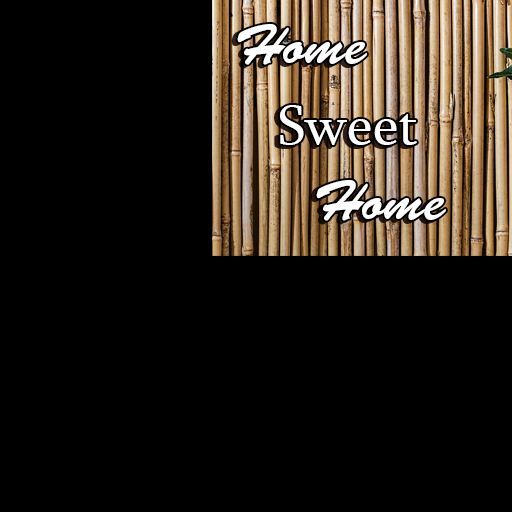
<style>
.page{position:relative;width:512px;height:512px;background:#000000}
.page>*{position:absolute;margin:0}
.t1{font:55.9px "BrushScriptStd";color:#ffffff}
.t2{font:55.9px "Sylfaen";color:#ffffff}
</style>
<div class="page">
<p class="t1" style="left:237px;top:24px;width:130px;height:41px">Home</p>
<p class="t2" style="left:280px;top:105px;width:137px;height:40px">Sweet</p>
<p class="t1" style="left:316px;top:180px;width:130px;height:41px">Home</p>
</div>
